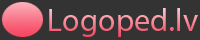
<style>
.page{position:relative;width:200px;height:40px;background:#333333}
.page>*{position:absolute;margin:0}
.t1{font:32px "MyriadPro-Regular";letter-spacing:0.005em}
</style>
<div class="page">
<p class="t1" style="left:49px;top:8px;width:149px;height:29px">Logoped.lv</p>
</div>
